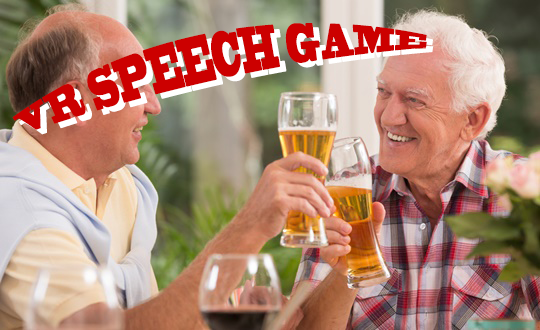
<style>
.page{position:relative;width:540px;height:330px}
.page>*{position:absolute;margin:0}
.t1{font:19.6px "BlackoakStd";letter-spacing:-0.018em;color:#cc0000;text-transform:uppercase;scale:0.92 1}
.t2{font:19.6px "BlackoakStd";letter-spacing:-0.018em;text-transform:uppercase;scale:0.92 1}
</style>
<div class="page">
<p class="t1" style="left:12px;top:23px;width:415px;height:107px;rotate:-12deg">vr speech game</p>
<p class="t2" style="left:19px;top:27px;width:415px;height:108px;rotate:-12deg">vr speech game</p>
</div>
